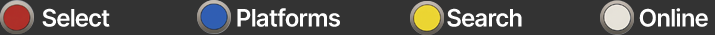
<style>
.page{position:relative;width:715px;height:35px;background:#333333}
.page>*{position:absolute;margin:0}
.t1{font:24px "InterTight-SemiBold";color:#ffffff}
</style>
<div class="page">
<p class="t1" style="left:42px;top:8px;width:666px;height:19px">Select                         Platforms                     Search                       Online</p>
</div>
